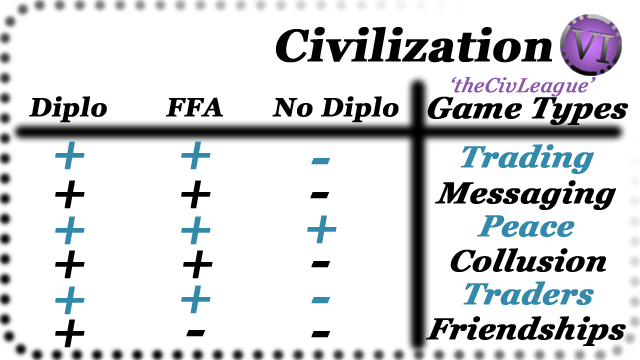
<style>
.page{position:relative;width:640px;height:360px;background:#ffffff}
.page>*{position:absolute;margin:0}
.t1{font:45px "Georgia-Bold";color:#000000;font-weight:bold;font-style:italic}
.t2{font:20px "Georgia-Italic";color:#8c54ac;font-weight:bold;font-style:italic}
.t3{font:26px "Georgia-Bold";color:#000000;font-weight:bold;font-style:italic}
.t4{font:30px "Georgia-BoldItalic";color:#000000;font-weight:bold;font-style:italic}
.t5{font:50px "Georgia-BoldItalic";color:#3389aa;font-weight:bold;font-style:italic}
.t6{font:30px "Georgia-BoldItalic";color:#3389aa;font-weight:bold;font-style:italic}
.t7{font:50px "Georgia-BoldItalic";color:#000000;font-weight:bold;font-style:italic}
</style>
<div class="page">
<p class="t1" style="left:276px;top:27px;width:276px;height:36px">Civilization</p>
<p class="t2" style="left:451px;top:77px;width:145px;height:20px">‘theCivLeague’</p>
<p class="t3" style="left:29px;top:96px;width:78px;height:27px">Diplo</p>
<p class="t3" style="left:166px;top:97px;width:57px;height:20px">FFA</p>
<p class="t3" style="left:272px;top:96px;width:127px;height:27px">No Diplo</p>
<p class="t4" style="left:427px;top:96px;width:201px;height:29px">Game Types</p>
<p class="t5" style="left:55px;top:141px;width:30px;height:29px">+</p>
<p class="t5" style="left:181px;top:141px;width:30px;height:29px">+</p>
<p class="t6" style="left:460px;top:144px;width:134px;height:30px">Trading</p>
<p class="t5" style="left:311px;top:158px;width:19px;height:7px">-</p>
<p class="t7" style="left:55px;top:180px;width:30px;height:29px">+</p>
<p class="t7" style="left:181px;top:180px;width:30px;height:29px">+</p>
<p class="t4" style="left:435px;top:180px;width:181px;height:30px">Messaging</p>
<p class="t7" style="left:310px;top:192px;width:19px;height:7px">-</p>
<p class="t5" style="left:55px;top:216px;width:30px;height:29px">+</p>
<p class="t5" style="left:181px;top:216px;width:30px;height:29px">+</p>
<p class="t5" style="left:307px;top:215px;width:30px;height:29px">+</p>
<p class="t6" style="left:477px;top:215px;width:98px;height:22px">Peace</p>
<p class="t7" style="left:55px;top:250px;width:30px;height:29px">+</p>
<p class="t7" style="left:183px;top:250px;width:30px;height:29px">+</p>
<p class="t4" style="left:450px;top:248px;width:156px;height:24px">Collusion</p>
<p class="t7" style="left:311px;top:261px;width:19px;height:7px">-</p>
<p class="t6" style="left:463px;top:281px;width:131px;height:24px">Traders</p>
<p class="t5" style="left:55px;top:286px;width:30px;height:29px">+</p>
<p class="t5" style="left:181px;top:285px;width:30px;height:29px">+</p>
<p class="t5" style="left:311px;top:297px;width:19px;height:7px">-</p>
<p class="t4" style="left:426px;top:316px;width:200px;height:30px">Friendships</p>
<p class="t7" style="left:55px;top:319px;width:30px;height:29px">+</p>
<p class="t7" style="left:186px;top:330px;width:19px;height:7px">-</p>
<p class="t7" style="left:311px;top:331px;width:19px;height:7px">-</p>
</div>
